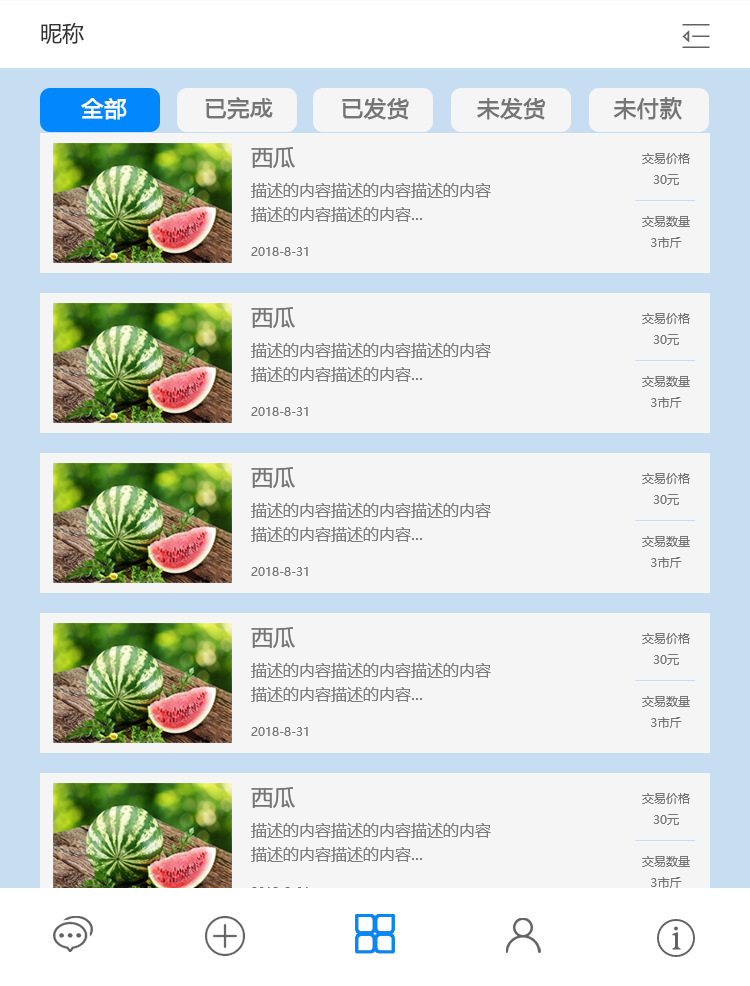
<style>
.page{position:relative;width:750px;height:986px;background:#f5f5f5}
.page>*{position:absolute;margin:0}
.t1{font:22px "MicrosoftYaHei";color:#323232;text-transform:uppercase}
.t2{font:22px "MicrosoftYaHei";color:#757575;text-transform:uppercase;font-weight:bold}
.t3{font:22px "MicrosoftYaHei";color:#ffffff;text-transform:uppercase;font-weight:bold}
.t4{font:16px/24px "MicrosoftYaHei";color:#7c7c7c}
.t5{font:22px/36px "MicrosoftYaHei";color:#757575}
.t6{font:12px "MicrosoftYaHei";color:#757575}
</style>
<div class="page">
<p class="t1" style="left:41px;top:22px;width:43px;height:22px">昵称</p>
<p class="t2" style="left:81px;top:97px;width:601px;height:23px"><span class="t3">全部</span>       已完成      已发货     未发货    未付款</p>
<p class="t4" style="left:251px;top:147px;width:240px;height:109px"><span class="t5">西瓜<br></span>描述的内容描述的内容描述的内容<br>描述的内容描述的内容...<br><br><span class="t6">2018-8-31</span></p>
<p class="t6" style="left:642px;top:153px;width:48px;height:95px;text-align:center">交易价格<br>30元<br><br>交易数量<br>3市斤</p>
<p class="t4" style="left:251px;top:307px;width:240px;height:109px"><span class="t5">西瓜<br></span>描述的内容描述的内容描述的内容<br>描述的内容描述的内容...<br><br><span class="t6">2018-8-31</span></p>
<p class="t6" style="left:642px;top:313px;width:48px;height:95px;text-align:center">交易价格<br>30元<br><br>交易数量<br>3市斤</p>
<p class="t4" style="left:251px;top:467px;width:240px;height:109px"><span class="t5">西瓜<br></span>描述的内容描述的内容描述的内容<br>描述的内容描述的内容...<br><br><span class="t6">2018-8-31</span></p>
<p class="t6" style="left:642px;top:473px;width:48px;height:95px;text-align:center">交易价格<br>30元<br><br>交易数量<br>3市斤</p>
<p class="t4" style="left:251px;top:627px;width:240px;height:109px"><span class="t5">西瓜<br></span>描述的内容描述的内容描述的内容<br>描述的内容描述的内容...<br><br><span class="t6">2018-8-31</span></p>
<p class="t6" style="left:642px;top:633px;width:48px;height:95px;text-align:center">交易价格<br>30元<br><br>交易数量<br>3市斤</p>
<p class="t4" style="left:251px;top:787px;width:240px;height:109px"><span class="t5">西瓜<br></span>描述的内容描述的内容描述的内容<br>描述的内容描述的内容...<br><br><span class="t6">2018-8-31</span></p>
<p class="t6" style="left:642px;top:793px;width:48px;height:95px;text-align:center">交易价格<br>30元<br><br>交易数量<br>3市斤</p>
</div>
